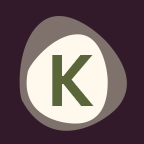
<style>
.page{position:relative;width:144px;height:144px;background:#331a2a}
.page>*{position:absolute;margin:0}
.t1{font:75.8px "CallunaSans-Bold";letter-spacing:0.01em;color:#5a663a}
</style>
<div class="page">
<p class="t1" style="left:52px;top:55px;width:42px;height:51px">K</p>
</div>
